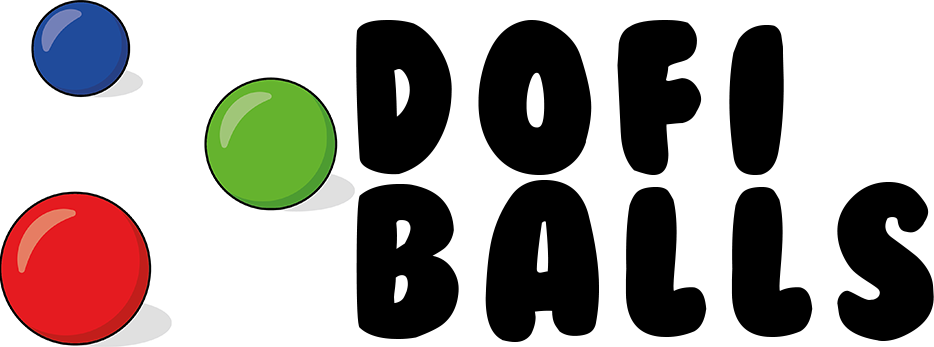
<style>
.page{position:relative;width:934px;height:347px;background:#ffffff}
.page>*{position:absolute;margin:0}
.t1{font:200px/54.8px "BubbleGum";letter-spacing:0.08em;color:#000000}
</style>
<div class="page">
<p class="t1" style="left:356px;top:20px;width:578px;height:322px">DoFi<br><br><br>Balls</p>
</div>
